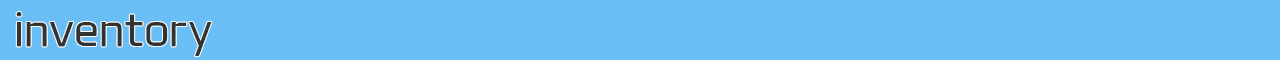
<style>
.page{position:relative;width:1280px;height:60px;background:#69bff5}
.page>*{position:absolute;margin:0}
.t1{font:42.9px "wamakeprice-regular";color:#333333}
</style>
<div class="page">
<p class="t1" style="left:16px;top:12px;width:196px;height:44px">inventory</p>
</div>
